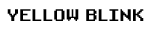
<style>
.page{position:relative;width:150px;height:30px;background:#ffffff}
.page>*{position:absolute;margin:0}
.t1{font:16px "RetroGaming";color:#000000}
</style>
<div class="page">
<p class="t1" style="left:7px;top:9px;width:137px;height:12px">YELLOW BLINK</p>
</div>
